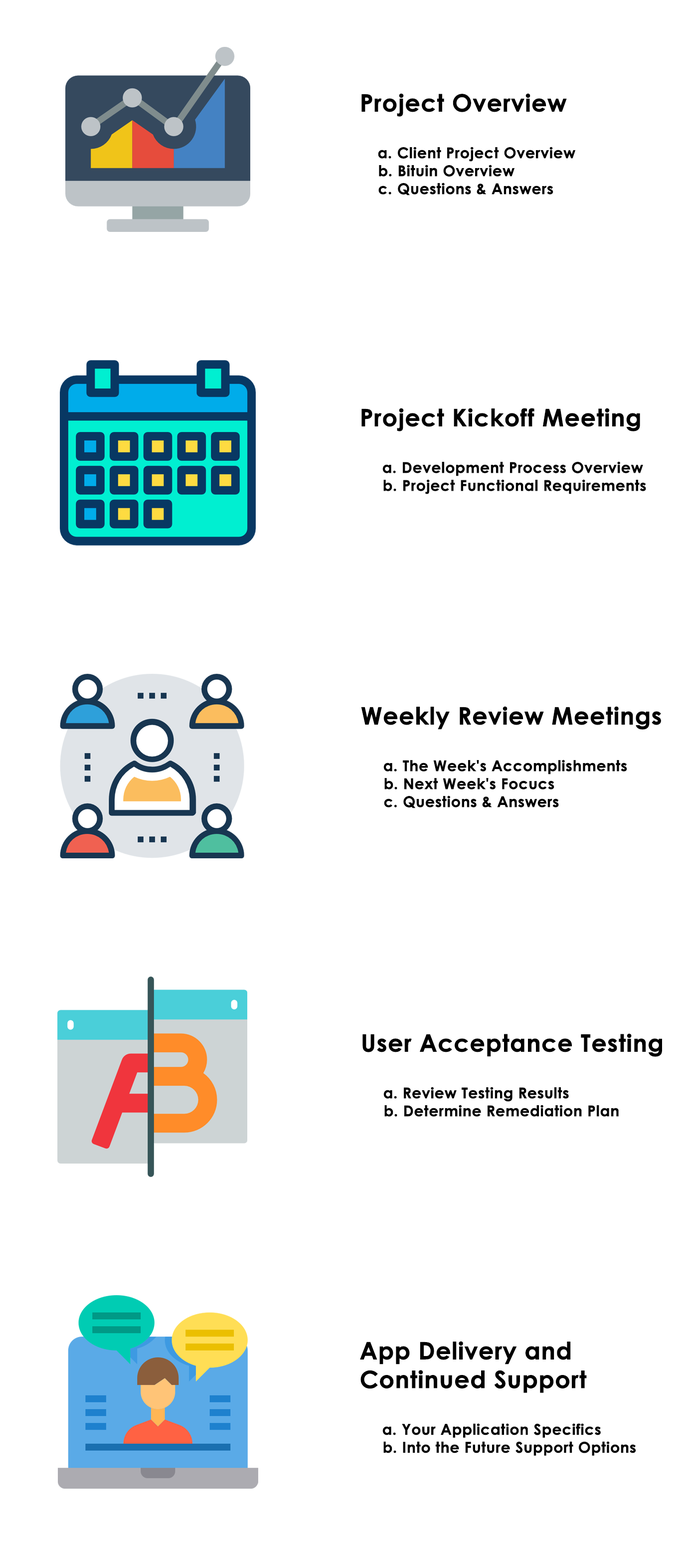
<style>
.page{position:relative;width:681px;height:1568px;background:#ffffff}
.page>*{position:absolute;margin:0}
.t1{font:15px "CenturyGothic-Bold";color:#000000;font-weight:bold}
.t2{font:23.9px "CenturyGothic-Bold";color:#000000;font-weight:bold}
</style>
<div class="page">
<p class="t1" style="left:362px;top:93px;width:214px;height:103px"><span class="t2">Project Overview<br><br></span> a. Client Project Overview<br>    b. Bituin Overview<br>    c. Questions &amp; Answers</p>
<p class="t1" style="left:362px;top:408px;width:284px;height:86px"><span class="t2">Project Kickoff Meeting<br><br></span>  a. Development Process Overview<br>     b. Project Functional Requirements</p>
<p class="t1" style="left:361px;top:706px;width:300px;height:102px"><span class="t2">Weekly Review Meetings<br><br></span>  a. The Week's Accomplishments<br>     b. Next Week's Focucs<br>     c. Questions &amp; Answers</p>
<p class="t1" style="left:363px;top:1033px;width:299px;height:84px"><span class="t2">User Acceptance Testing<br><br></span>  a. Review Testing Results<br>     b. Determine Remediation Plan</p>
<p class="t1" style="left:360px;top:1341px;width:276px;height:115px"><span class="t2">App Delivery and Continued Support<br><br></span>  a. Your Application Specifics<br>     b. Into the Future Support Options</p>
</div>
